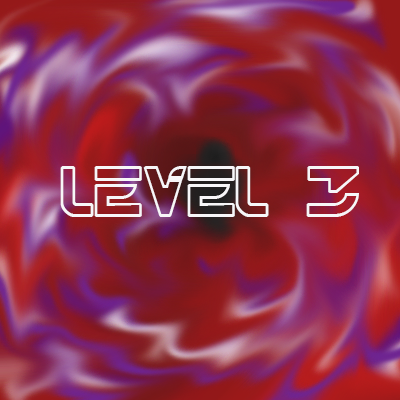
<style>
.page{position:relative;width:400px;height:400px}
.page>*{position:absolute;margin:0}
.t1{font:72px "TRN";color:#f7f6f8}
</style>
<div class="page">
<p class="t1" style="left:60px;top:166px;width:299px;height:51px">Level 3</p>
</div>
